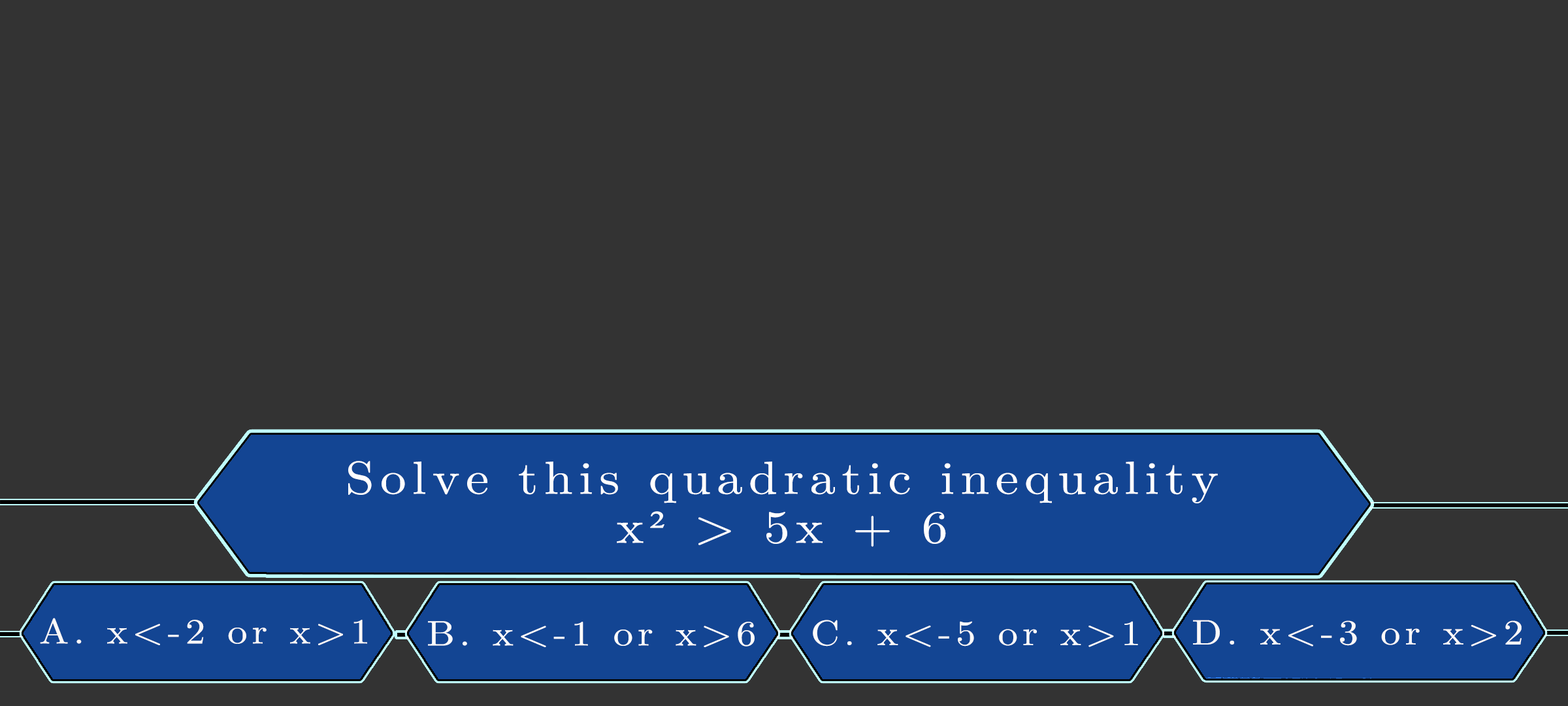
<style>
.page{position:relative;width:1568px;height:706px;background:#333333}
.page>*{position:absolute;margin:0}
.t1{font:46.3px/49px "LatinModernMath-Regular";letter-spacing:0.115em;color:#ffffff;scale:1.12 1}
.t2{font:46.3px/49px "TimesNewRomanPSMT";letter-spacing:0.115em;color:#ffffff;scale:1.12 1}
.t3{font:35.4px "LatinModernMath-Regular";letter-spacing:0.115em;color:#faf8f8;scale:1.12 1}
.t4{font:35.4px "LatinModernMath-Regular";letter-spacing:0.115em;color:#faf8f8;text-transform:uppercase;scale:1.12 1}
.t5{font:35.4px "LatinModernMath-Regular";letter-spacing:0.115em;color:#fdfdfd;scale:1.12 1}
.t6{font:35.4px "LatinModernMath-Regular";letter-spacing:0.115em;color:#fdfdfd;text-transform:uppercase;scale:1.12 1}
.t7{font:35.4px "LatinModernMath-Regular";letter-spacing:0.115em;color:#fbfbfb;scale:1.12 1}
.t8{font:35.4px "LatinModernMath-Regular";letter-spacing:0.115em;color:#fbfbfb;text-transform:uppercase;scale:1.12 1}
.t9{font:35.4px "LatinModernMath-Regular";letter-spacing:0.115em;color:#fdf9f9;scale:1.12 1}
.t10{font:35.4px "LatinModernMath-Regular";letter-spacing:0.115em;color:#fdf9f9;text-transform:uppercase;scale:1.12 1}
</style>
<div class="page">
<p class="t1" style="left:348px;top:461px;width:870px;height:86px;text-align:center">Solve this quadratic inequality<br>x<span class="t2">²</span> &gt; 5x + 6</p>
<p class="t3" style="left:40px;top:617px;width:327px;height:28px"><span class="t4">a.</span> x&lt;-2 or x&gt;1</p>
<p class="t5" style="left:428px;top:621px;width:327px;height:26px"><span class="t6">b. </span>x&lt;-1 or x&gt;6</p>
<p class="t7" style="left:813px;top:619px;width:325px;height:28px"><span class="t8">c. </span>x&lt;-5 or x&gt;1</p>
<p class="t9" style="left:1193px;top:619px;width:329px;height:27px"><span class="t10">d. </span>x&lt;-3 or x&gt;2</p>
</div>
